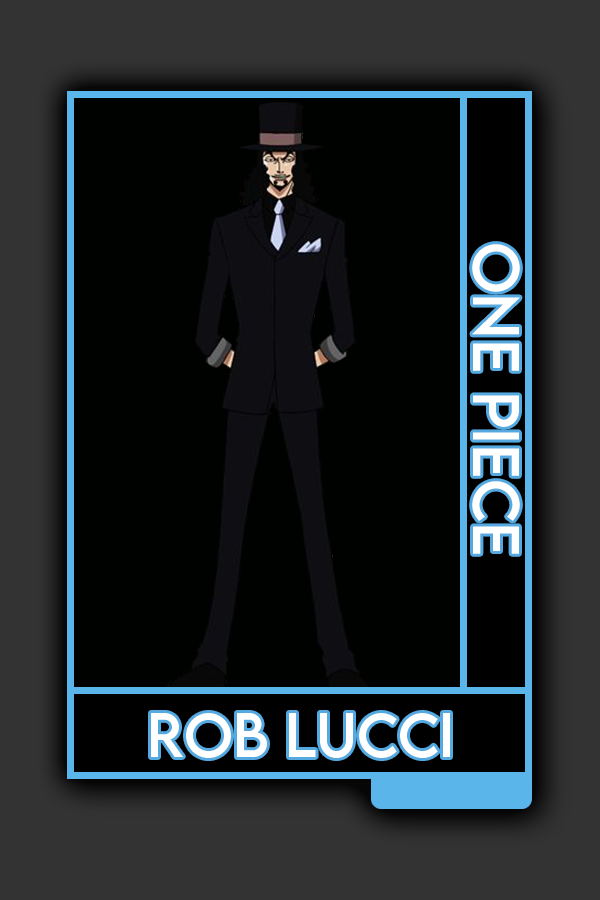
<style>
.page{position:relative;width:600px;height:900px;background:#000200}
.page>*{position:absolute;margin:0}
.t1{font:58.4px "LEMONMILK-Regular";color:#ffffff}
.t2{font:55.4px "LEMONMILK-Regular";color:#ffffff}
</style>
<div class="page">
<p class="t1" style="left:472px;top:244px;width:48px;height:310px;rotate:90deg">One Piece</p>
<p class="t2" style="left:151px;top:713px;width:299px;height:45px">Rob Lucci</p>
</div>
